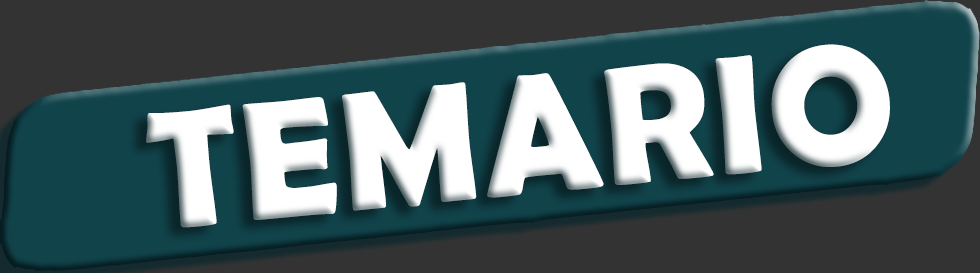
<style>
.page{position:relative;width:980px;height:273px;background:#333333}
.page>*{position:absolute;margin:0}
.t1{font:168px "BerlinSansFBDemi-Bold";color:#ffffff;font-weight:bold}
</style>
<div class="page">
<p class="t1" style="left:146px;top:44px;width:744px;height:184px;rotate:-6deg">TEMARIO</p>
</div>
